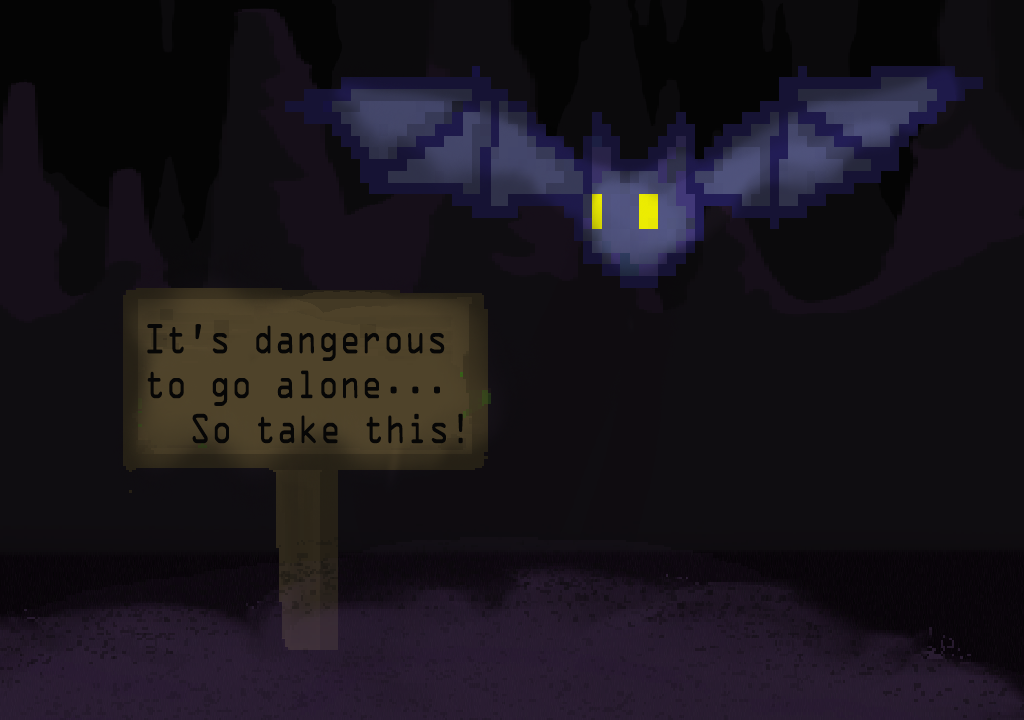
<style>
.page{position:relative;width:1024px;height:720px;background:#0f0d11}
.page>*{position:absolute;margin:0}
.t1{font:37.4px "OCRAStd";color:#060606;scale:0.81 1}
</style>
<div class="page">
<p class="t1" style="left:147px;top:324px;width:316px;height:120px">It’s dangerous <br>to go alone...<br> So take this!</p>
</div>
